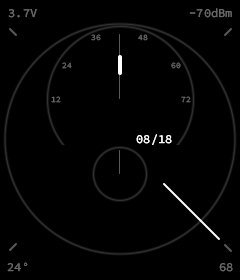
<style>
.page{position:relative;width:240px;height:280px;background:#000000}
.page>*{position:absolute;margin:0}
.t1{font:12px "SourceCodePro-Regular";color:#676767}
.t2{font:8px "SourceCodePro-Regular";color:#676767}
.t3{font:8px "SourceCodePro-Regular"}
.t4{font:12px "SourceCodePro-Regular";color:#ffffff}
</style>
<div class="page">
<p class="t1" style="left:8px;top:9px;width:29px;height:9px">3.7V</p>
<p class="t1" style="left:189px;top:8px;width:43px;height:10px">-70dBm</p>
<p class="t2" style="left:91px;top:34px;width:10px;height:7px">36</p>
<p class="t3" style="left:138px;top:34px;width:10px;height:7px">48</p>
<p class="t2" style="left:62px;top:62px;width:10px;height:7px">24</p>
<p class="t3" style="left:171px;top:62px;width:10px;height:7px">60</p>
<p class="t2" style="left:51px;top:96px;width:10px;height:7px">12</p>
<p class="t2" style="left:181px;top:96px;width:10px;height:7px">72</p>
<p class="t4" style="left:136px;top:134px;width:36px;height:11px">08/18</p>
<p class="t1" style="left:7px;top:262px;width:21px;height:10px">24°</p>
<p class="t1" style="left:219px;top:263px;width:14px;height:9px">68</p>
</div>
